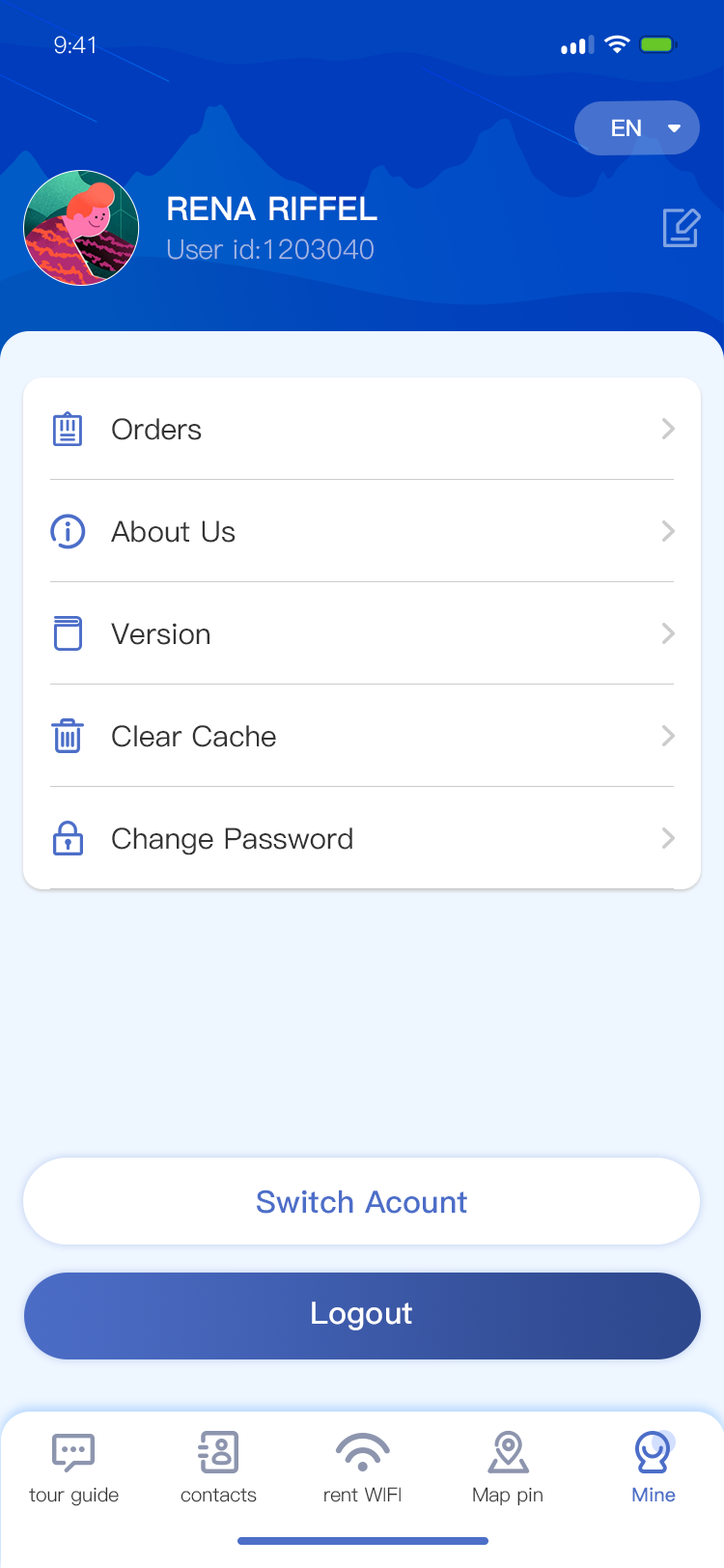
<style>
.page{position:relative;width:724px;height:1568px;background:#ffffff}
.page>*{position:absolute;margin:0}
.t1{font:23.2px "PingFang-SC-Regular";letter-spacing:-0.025em;color:#ffffff}
.t2{font:23.2px "PingFang-SC-Bold";color:#ffffff}
.t3{font:32.8px "PingFang-SC-Heavy";color:#ffffff;text-transform:uppercase}
.t4{font:27px "PingFang-SC-Regular";color:#a4b7e4;text-transform:uppercase}
.t5{font:27px "PingFang-SC-Regular";color:#a4b7e4}
.t6{font:29px "PingFang-SC-Medium";color:#333333}
.t7{font:29px "PingFang-SC-Medium";color:#333333;text-transform:uppercase}
.t8{font:30.9px "PingFang-SC-Bold";color:#4c6ec8}
.t9{font:30.9px "PingFang-SC-Bold";color:#4c6ec8;text-transform:uppercase}
.t10{font:30.9px "PingFang-SC-Bold";color:#ffffff}
.t11{font:19.3px "PingFang-SC-Regular";color:#333333}
.t12{font:19.3px "PingFang-SC-Bold";color:#4c6ec8}
</style>
<div class="page">
<p class="t1" style="left:54px;top:36px;width:41px;height:18px">9:41</p>
<p class="t2" style="left:612px;top:119px;width:29px;height:17px">EN</p>
<p class="t3" style="left:168px;top:196px;width:210px;height:24px">Rena Riffel</p>
<p class="t4" style="left:167px;top:238px;width:207px;height:22px">u<span class="t5">ser id</span>:1203040</p>
<p class="t6" style="left:112px;top:418px;width:90px;height:22px"><span class="t7">O</span>rders</p>
<p class="t6" style="left:111px;top:520px;width:125px;height:23px"><span class="t7">a</span>bout<span class="t7"> u</span>s</p>
<p class="t6" style="left:111px;top:623px;width:99px;height:22px"><span class="t7">v</span>ersion</p>
<p class="t6" style="left:112px;top:725px;width:164px;height:22px"><span class="t7">c</span>lear <span class="t7">c</span>ache</p>
<p class="t6" style="left:112px;top:827px;width:240px;height:28px"><span class="t7">c</span>hange <span class="t7">p</span>assword</p>
<p class="t8" style="left:257px;top:1190px;width:210px;height:24px"><span class="t9">s</span>witch <span class="t9">a</span>count</p>
<p class="t10" style="left:312px;top:1302px;width:100px;height:28px">Logout</p>
<p class="t11" style="left:29px;top:1487px;width:90px;height:19px">tour guide</p>
<p class="t11" style="left:181px;top:1488px;width:76px;height:14px">contacts</p>
<p class="t11" style="left:324px;top:1487px;width:77px;height:15px">rent WIFI</p>
<p class="t11" style="left:473px;top:1487px;width:70px;height:19px">Map pin</p>
<p class="t12" style="left:632px;top:1487px;width:44px;height:15px">Mine</p>
</div>
